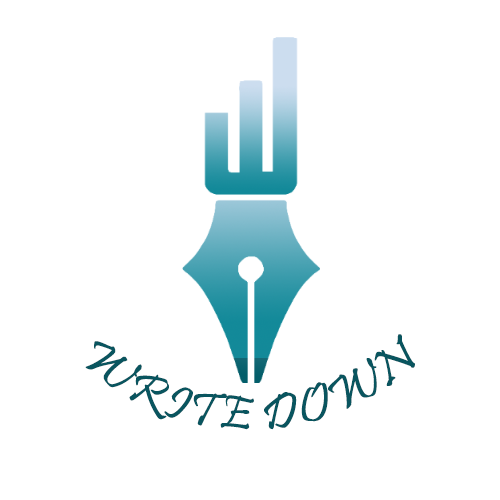
<style>
.page{position:relative;width:500px;height:500px;background:#ffffff}
.page>*{position:absolute;margin:0}
.t1{font:50px/24px "Pristina-Regular";color:#09555f;scale:0.9 1}
</style>
<div class="page">
<p class="t1" style="left:85px;top:334px;width:330px;height:96px;text-align:center">WRITE DOWN</p>
</div>
